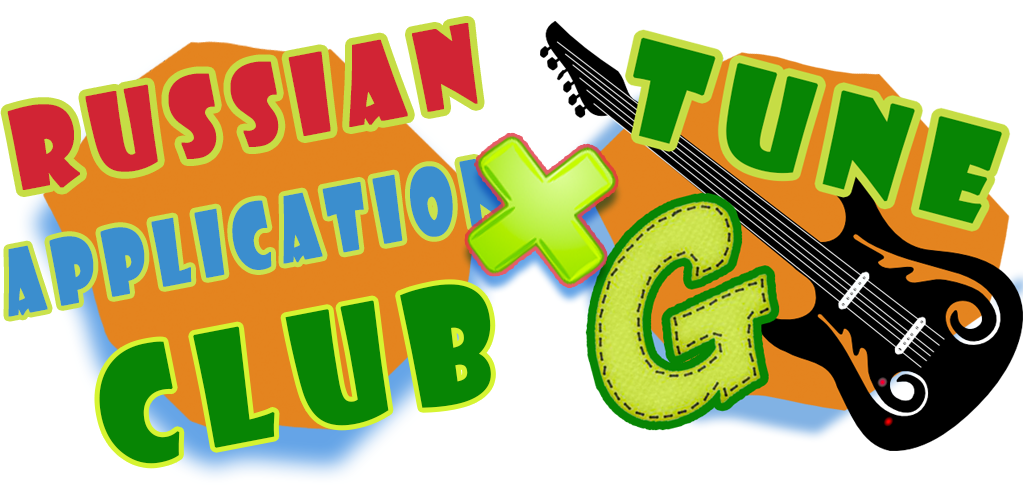
<style>
.page{position:relative;width:1024px;height:500px;background:#ffffff}
.page>*{position:absolute;margin:0}
.t1{font:104.2px "ShowcardGothic-Reg";letter-spacing:0.16em;color:#d12434;font-weight:bold;scale:0.88 1}
.t2{font:86.2px "ShowcardGothic-Reg";letter-spacing:0.16em;color:#3b8ece;font-weight:bold;scale:0.71 1}
.t3{font:150.6px "ShowcardGothic-Reg";letter-spacing:0.16em;color:#078504;font-weight:bold;scale:0.87 1}
</style>
<div class="page">
<p class="t1" style="left:7px;top:23px;width:471px;height:167px;rotate:-11deg">Russian</p>
<p class="t2" style="left:8px;top:154px;width:497px;height:163px;rotate:-11deg">Application</p>
<p class="t3" style="left:99px;top:284px;width:392px;height:180px;rotate:-11deg">Club</p>
</div>
